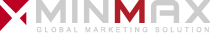
<style>
.page{position:relative;width:210px;height:33px;background:#ffffff}
.page>*{position:absolute;margin:0}
.t1{font:6.9px "ArialMT";letter-spacing:0.4em;color:#cccccc}
</style>
<div class="page">
<p class="t1" style="left:36px;top:27px;width:173px;height:6px">GLOBAL MARKETING SOLUTION</p>
</div>
